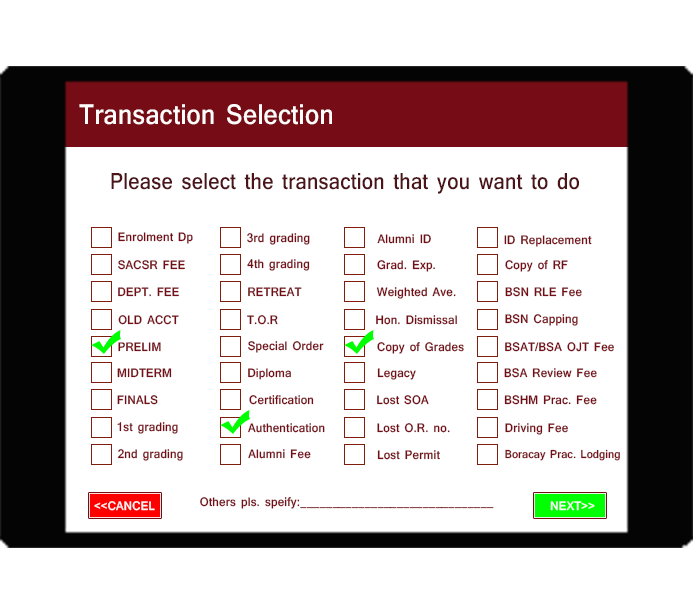
<style>
.page{position:relative;width:693px;height:612px;background:#ffffff}
.page>*{position:absolute;margin:0}
.t1{font:29.9px "Shruti-Bold";letter-spacing:0.01em;color:#fffcfb;scale:0.89 1}
.t2{font:24.2px "Shruti-Bold";letter-spacing:0.01em;color:#4c1419;scale:0.88 1}
.t3{font:13px "Shruti-Bold";letter-spacing:0.01em;color:#760c16;scale:0.95 1}
.t4{font:12.8px "Shruti-Bold";letter-spacing:0.01em;color:#760c16;scale:0.96 1}
.t5{font:12px "Shruti-Bold";letter-spacing:0.01em;color:#760c16;scale:0.95 1}
.t6{font:13px "Shruti-Bold";letter-spacing:0.01em;color:#faf7f7;scale:0.95 1}
.t7{font:13px "Shruti-Bold";letter-spacing:0.01em;color:#fcf9f9;scale:0.95 1}
</style>
<div class="page">
<p class="t1" style="left:79px;top:104px;width:253px;height:21px">Transaction Selection</p>
<p class="t2" style="left:111px;top:173px;width:468px;height:21px">Please select the transaction that you want to do</p>
<p class="t3" style="left:118px;top:232px;width:75px;height:12px">Enrolment Dp</p>
<p class="t3" style="left:247px;top:233px;width:63px;height:12px">3rd grading</p>
<p class="t3" style="left:377px;top:234px;width:54px;height:10px">Alumni ID</p>
<p class="t3" style="left:504px;top:235px;width:88px;height:12px">ID Replacement</p>
<p class="t3" style="left:118px;top:260px;width:67px;height:10px">SACSR FEE</p>
<p class="t3" style="left:247px;top:259px;width:63px;height:12px">4th grading</p>
<p class="t3" style="left:377px;top:260px;width:58px;height:12px">Grad. Exp.</p>
<p class="t3" style="left:505px;top:260px;width:63px;height:12px">Copy of RF</p>
<p class="t3" style="left:118px;top:287px;width:61px;height:10px">DEPT. FEE</p>
<p class="t3" style="left:248px;top:287px;width:54px;height:10px">RETREAT</p>
<p class="t3" style="left:376px;top:287px;width:80px;height:12px">Weighted Ave.</p>
<p class="t3" style="left:505px;top:287px;width:77px;height:10px">BSN RLE Fee</p>
<p class="t3" style="left:118px;top:315px;width:61px;height:10px">OLD ACCT</p>
<p class="t3" style="left:247px;top:315px;width:31px;height:10px">T.O.R</p>
<p class="t3" style="left:376px;top:315px;width:81px;height:10px">Hon. Dismissal</p>
<p class="t3" style="left:505px;top:314px;width:73px;height:12px">BSN Capping</p>
<p class="t3" style="left:118px;top:342px;width:43px;height:10px">PRELIM</p>
<p class="t3" style="left:248px;top:341px;width:76px;height:12px">Special Order</p>
<p class="t3" style="left:377px;top:342px;width:87px;height:12px">Copy of Grades</p>
<p class="t3" style="left:505px;top:342px;width:109px;height:10px">BSAT/BSA OJT Fee</p>
<p class="t3" style="left:117px;top:368px;width:55px;height:10px">MIDTERM</p>
<p class="t4" style="left:248px;top:368px;width:43px;height:12px">Diploma</p>
<p class="t3" style="left:377px;top:368px;width:39px;height:12px">Legacy</p>
<p class="t3" style="left:504px;top:368px;width:93px;height:10px">BSA Review Fee</p>
<p class="t3" style="left:117px;top:395px;width:41px;height:10px">FINALS</p>
<p class="t3" style="left:249px;top:395px;width:65px;height:10px">Certification</p>
<p class="t3" style="left:377px;top:395px;width:52px;height:10px">Lost SOA</p>
<p class="t3" style="left:504px;top:395px;width:93px;height:10px">BSHM Prac. Fee</p>
<p class="t3" style="left:117px;top:422px;width:61px;height:12px">1st grading</p>
<p class="t3" style="left:248px;top:423px;width:77px;height:10px">Authentication</p>
<p class="t3" style="left:377px;top:423px;width:73px;height:10px">Lost O.R. no.</p>
<p class="t3" style="left:505px;top:423px;width:63px;height:12px">Driving Fee</p>
<p class="t3" style="left:117px;top:449px;width:66px;height:12px">2nd grading</p>
<p class="t3" style="left:248px;top:449px;width:63px;height:10px">Alumni Fee</p>
<p class="t5" style="left:505px;top:449px;width:115px;height:12px">Boracay Prac. Lodging</p>
<p class="t3" style="left:377px;top:450px;width:63px;height:10px">Lost Permit</p>
<p class="t3" style="left:200px;top:497px;width:294px;height:12px">Others pls. speify:______________________________</p>
<p class="t6" style="left:94px;top:501px;width:61px;height:10px">&lt;&lt;CANCEL</p>
<p class="t7" style="left:550px;top:501px;width:45px;height:10px">NEXT&gt;&gt;</p>
</div>
